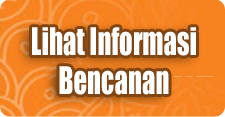
<style>
.page{position:relative;width:225px;height:117px}
.page>*{position:absolute;margin:0}
.t1{font:35.3px/39.2px "Impact";color:#ffffff;scale:0.76 1}
.t2{font:48.1px/54.5px "BrushScriptMT";color:#fff600;scale:0.76 1}
</style>
<div class="page">
<p class="t1" style="left:32px;top:27px;width:164px;height:68px;text-align:center"><span class="t2"><br></span>Lihat Informasi<br>Bencanan</p>
</div>
